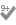
<style>
.page{position:relative;width:16px;height:25px;background:#ffffff}
.page>*{position:absolute;margin:0}
.t1{font:8px "ArialMT";color:#828282}
</style>
<div class="page">
<p class="t1" style="left:1px;top:5px;width:9px;height:6px">9+</p>
</div>
